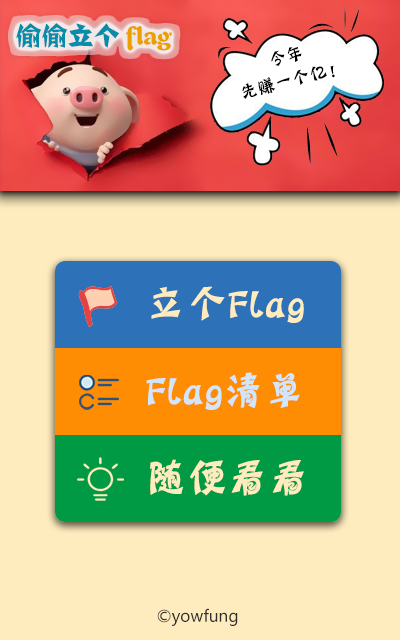
<style>
.page{position:relative;width:400px;height:640px;background:#ffecbe}
.page>*{position:absolute;margin:0}
.t1{font:26px "FZJZJW--GB1-0";color:#078ca9}
.t2{font:26px "FZJZJW--GB1-0";color:#eba000}
.t3{font:18px/24px "HYn3gj";color:#000000}
.t4{font:40px "HYn3gj";color:#ffecbe;font-weight:bold}
.t5{font:40px "HYn3gj";color:#d2e6fb;font-weight:bold}
.t6{font:16px "MicrosoftYaHei";color:#2f2f2f}
</style>
<div class="page">
<p class="t1" style="left:16px;top:23px;width:156px;height:28px">偷偷立个 <span class="t2">flag</span></p>
<p class="t3" style="left:242px;top:46px;width:93px;height:53px;text-align:center;rotate:-14deg">今年<br>先赚一个亿！</p>
<p class="t4" style="left:151px;top:286px;width:153px;height:37px">立个Flag</p>
<p class="t5" style="left:146px;top:372px;width:154px;height:38px">Flag清单</p>
<p class="t4" style="left:150px;top:459px;width:154px;height:37px">随便看看</p>
<p class="t6" style="left:157px;top:608px;width:81px;height:18px">©yowfung</p>
</div>
